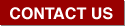
<style>
.page{position:relative;width:125px;height:26px;background:#990000}
.page>*{position:absolute;margin:0}
.t1{font:16px "Helvetica-Bold";color:#ffffff}
</style>
<div class="page">
<p class="t1" style="left:10px;top:7px;width:103px;height:13px">CONTACT US</p>
</div>
